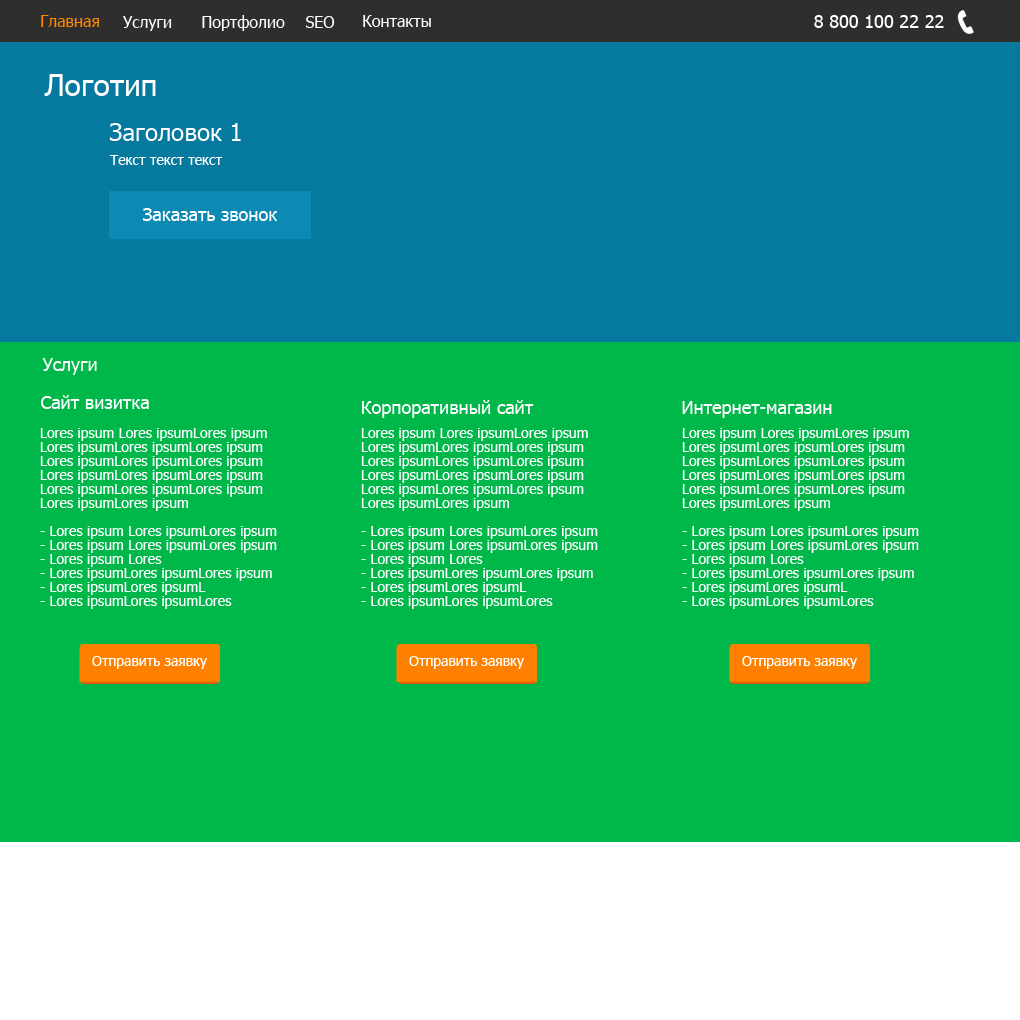
<style>
.page{position:relative;width:1020px;height:1020px;background:#00b74a}
.page>*{position:absolute;margin:0}
.t1{font:16px "Tahoma";color:#fe8600}
.t2{font:16px "Tahoma";color:#ffffff}
.t3{font:18px "Tahoma";color:#ffffff}
.t4{font:30px "Tahoma";color:#ffffff}
.t5{font:24px "Tahoma";color:#ffffff}
.t6{font:14px "Tahoma";color:#ffffff}
.t7{font:14px/14px "Tahoma";color:#ffffff}
</style>
<div class="page">
<p class="t1" style="left:41px;top:15px;width:58px;height:12px">Главная</p>
<p class="t2" style="left:123px;top:16px;width:49px;height:15px">Услуги</p>
<p class="t2" style="left:202px;top:15px;width:83px;height:16px">Портфолио</p>
<p class="t2" style="left:306px;top:16px;width:29px;height:12px">SEO</p>
<p class="t2" style="left:363px;top:15px;width:68px;height:12px">Контакты</p>
<p class="t3" style="left:814px;top:15px;width:130px;height:13px">8 800 100 22 22</p>
<p class="t4" style="left:44px;top:74px;width:112px;height:22px">Логотип</p>
<p class="t5" style="left:109px;top:123px;width:132px;height:18px">Заголовок 1</p>
<p class="t6" style="left:109px;top:155px;width:114px;height:10px">Текст текст текст</p>
<p class="t3" style="left:142px;top:208px;width:136px;height:13px">Заказать звонок</p>
<p class="t3" style="left:42px;top:358px;width:55px;height:17px">Услуги</p>
<p class="t3" style="left:41px;top:395px;width:108px;height:14px">Сайт визитка</p>
<p class="t3" style="left:362px;top:400px;width:172px;height:18px">Корпоративный сайт</p>
<p class="t3" style="left:682px;top:401px;width:150px;height:17px">Интернет-магазин</p>
<p class="t7" style="left:40px;top:428px;width:237px;height:181px">Lores ipsum Lores ipsumLores ipsum<br>Lores ipsumLores ipsumLores ipsum<br>Lores ipsumLores ipsumLores ipsum<br>Lores ipsumLores ipsumLores ipsum<br>Lores ipsumLores ipsumLores ipsum<br>Lores ipsumLores ipsum<br><br>- Lores ipsum Lores ipsumLores ipsum<br>- Lores ipsum Lores ipsumLores ipsum<br>- Lores ipsum Lores <br>- Lores ipsumLores ipsumLores ipsum<br>- Lores ipsumLores ipsumL<br>- Lores ipsumLores ipsumLores</p>
<p class="t7" style="left:361px;top:428px;width:237px;height:181px">Lores ipsum Lores ipsumLores ipsum<br>Lores ipsumLores ipsumLores ipsum<br>Lores ipsumLores ipsumLores ipsum<br>Lores ipsumLores ipsumLores ipsum<br>Lores ipsumLores ipsumLores ipsum<br>Lores ipsumLores ipsum<br><br>- Lores ipsum Lores ipsumLores ipsum<br>- Lores ipsum Lores ipsumLores ipsum<br>- Lores ipsum Lores <br>- Lores ipsumLores ipsumLores ipsum<br>- Lores ipsumLores ipsumL<br>- Lores ipsumLores ipsumLores</p>
<p class="t7" style="left:682px;top:428px;width:237px;height:181px">Lores ipsum Lores ipsumLores ipsum<br>Lores ipsumLores ipsumLores ipsum<br>Lores ipsumLores ipsumLores ipsum<br>Lores ipsumLores ipsumLores ipsum<br>Lores ipsumLores ipsumLores ipsum<br>Lores ipsumLores ipsum<br><br>- Lores ipsum Lores ipsumLores ipsum<br>- Lores ipsum Lores ipsumLores ipsum<br>- Lores ipsum Lores <br>- Lores ipsumLores ipsumLores ipsum<br>- Lores ipsumLores ipsumL<br>- Lores ipsumLores ipsumLores</p>
</div>
